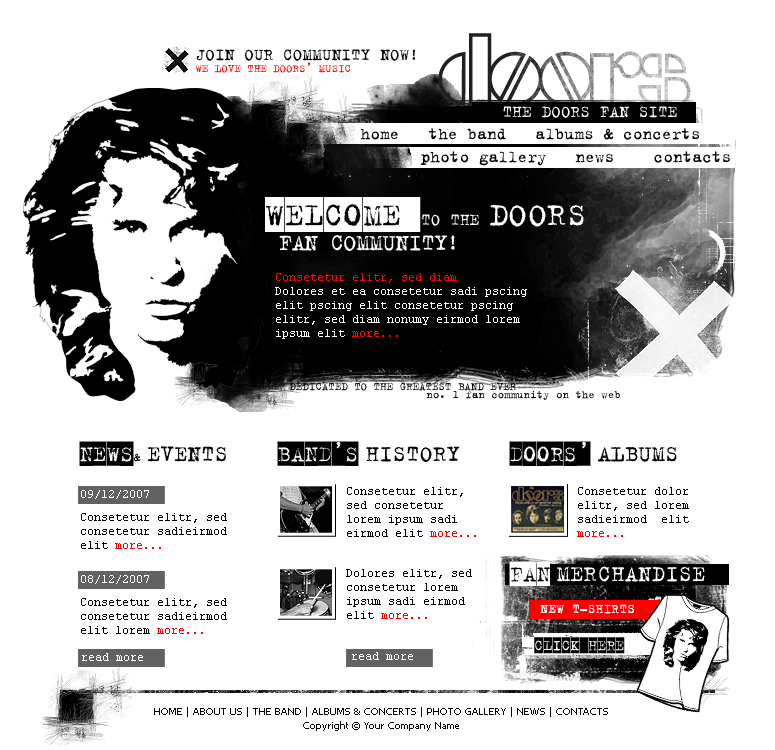
<style>
.page{position:relative;width:775px;height:750px;background:#ffffff}
.page>*{position:absolute;margin:0}
.t1{font:18px "Trixie-Plain";color:#000000}
.t2{font:12px "Trixie-Plain";color:#ff0000}
.t3{font:18px "Trixie-Plain";color:#ffffff}
.t4{font:25px/24.9px "Trixie-Plain";color:#ffffff}
.t5{font:35px/24.9px "Trixie-Cameo";color:#ffffff}
.t6{font:18px/24.9px "Trixie-Plain";color:#ffffff}
.t7{font:35px/24.9px "Trixie-Plain";color:#ffffff}
.t8{font:12px/14px "CourierNewPSMT";color:#ffffff}
.t9{font:12px/14px "CourierNewPSMT";color:#ff0000}
.t10{font:12px "Trixie-Plain";color:#000000}
.t11{font:24.4px "Trixie-Plain";color:#000000}
.t12{font:24.4px "Trixie-Cameo";color:#000000}
.t13{font:12.5px "Trixie-Plain";color:#000000}
.t14{font:12px "CourierNewPSMT";color:#ffffff}
.t15{font:12px/14px "CourierNewPSMT";color:#000000}
.t16{font:24.4px "Trixie-Plain";color:#ffffff}
.t17{font:24.4px "Trixie-Cameo";color:#ffffff}
.t18{font:14px "Trixie-Plain";color:#ffffff}
.t19{font:16px "Trixie-Cameo";color:#000000}
.t20{font:10px/14px "Tahoma";color:#000000}
</style>
<div class="page">
<p class="t1" style="left:196px;top:49px;width:219px;height:12px">JOIN OUR COMMUNITY NOW!</p>
<p class="t2" style="left:195px;top:62px;width:155px;height:11px">WE LOVE THE DOORS’ MUSIC</p>
<p class="t3" style="left:503px;top:106px;width:174px;height:12px">THE DOORS FAN SITE</p>
<p class="t1" style="left:360px;top:128px;width:38px;height:12px">home</p>
<p class="t1" style="left:429px;top:128px;width:77px;height:12px">the band</p>
<p class="t1" style="left:536px;top:128px;width:163px;height:12px">albums &amp; concerts</p>
<p class="t1" style="left:420px;top:151px;width:126px;height:15px">photo gallery</p>
<p class="t1" style="left:575px;top:154px;width:38px;height:9px">news</p>
<p class="t1" style="left:654px;top:151px;width:76px;height:12px">contacts</p>
<p class="t4" style="left:265px;top:197px;width:319px;height:54px"><span class="t5">WELCOME </span><span class="t6">TO THE </span><span class="t7">DOORS <br></span> FAN COMMUNITY!</p>
<p class="t8" style="left:275px;top:273px;width:252px;height:66px"><span class="t9">Consetetur elitr, sed diam <br></span>Dolores et ea consetetur sadi pscing elit pscing elit consetetur pscing elitr, sed diam nonumy eirmod lorem ipsum elit <span class="t9">more...</span></p>
<p class="t10" style="left:289px;top:383px;width:227px;height:8px">DEDICATED TO THE GREATEST BAND EVER</p>
<p class="t10" style="left:426px;top:391px;width:194px;height:9px">no. 1 fan community on the web</p>
<p class="t11" style="left:79px;top:441px;width:147px;height:25px"><span class="t12">NEWS</span><span class="t13">&amp; </span>EVENTS</p>
<p class="t11" style="left:277px;top:441px;width:183px;height:25px"><span class="t12">BAND’S </span>HISTORY</p>
<p class="t12" style="left:509px;top:441px;width:168px;height:25px">DOORS’ <span class="t11">ALBUMS</span></p>
<p class="t14" style="left:81px;top:490px;width:68px;height:9px">09/12/2007</p>
<p class="t15" style="left:347px;top:487px;width:129px;height:50px">Consetetur elitr, sed consetetur lorem ipsum sadi eirmod elit <span class="t9">more...</span></p>
<p class="t15" style="left:577px;top:487px;width:112px;height:50px">Consetetur dolor elitr, sed lorem sadieirmod  elit <span class="t9">more...</span></p>
<p class="t15" style="left:81px;top:513px;width:146px;height:36px">Consetetur elitr, sed consetetur sadieirmod  elit <span class="t9">more...</span></p>
<p class="t15" style="left:346px;top:569px;width:126px;height:50px">Dolores elitr, sed consetetur lorem ipsum sadi eirmod elit <span class="t9">more...</span></p>
<p class="t16" style="left:509px;top:561px;width:196px;height:25px"><span class="t17">FAN </span>MERCHANDISE</p>
<p class="t14" style="left:81px;top:575px;width:68px;height:9px">08/12/2007</p>
<p class="t15" style="left:81px;top:598px;width:146px;height:36px">Consetetur elitr, sed consetetur sadieirmod  elit lorem <span class="t9">more...</span></p>
<p class="t18" style="left:540px;top:604px;width:94px;height:10px">NEW T-SHIRTS</p>
<p class="t18" style="left:540px;top:604px;width:94px;height:10px">NEW T-SHIRTS</p>
<p class="t19" style="left:534px;top:637px;width:91px;height:17px">CLICK HERE</p>
<p class="t14" style="left:82px;top:653px;width:61px;height:8px">read more</p>
<p class="t14" style="left:352px;top:652px;width:61px;height:8px">read more</p>
<p class="t20" style="left:154px;top:707px;width:454px;height:24px;text-align:center">HOME | ABOUT US | THE BAND | ALBUMS &amp; CONCERTS | PHOTO GALLERY | NEWS | CONTACTS<br>Copyright © Your Company Name</p>
</div>
